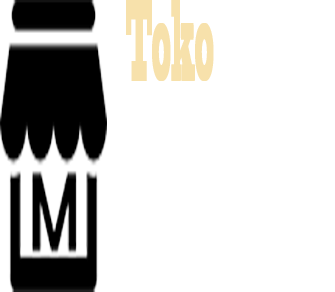
<style>
.page{position:relative;width:335px;height:292px;background:#ffffff}
.page>*{position:absolute;margin:0}
.t1{font:107.7px "BlackoakStd";color:#f7e1ab;scale:0.13 1}
</style>
<div class="page">
<p class="t1" style="left:126px;top:0px;width:88px;height:81px">Toko</p>
</div>
